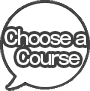
<style>
.page{position:relative;width:90px;height:91px;background:#ffffff}
.page>*{position:absolute;margin:0}
.t1{font:19px/20px "GothicMB101Pro-Medium";letter-spacing:-0.08em;color:#ffffff;scale:0.95 1}
</style>
<div class="page">
<p class="t1" style="left:4px;top:29px;width:83px;height:36px;text-align:center">Choose a<br> Course</p>
</div>
